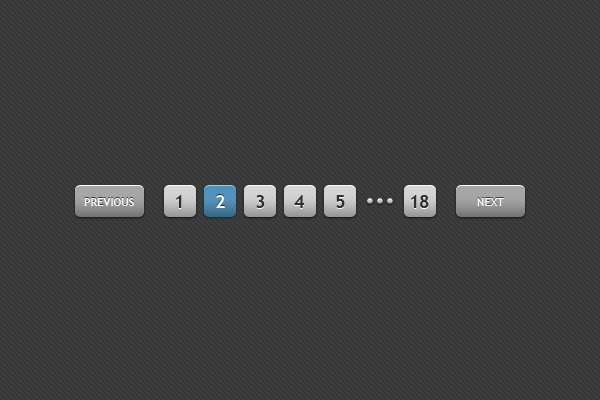
<style>
.page{position:relative;width:600px;height:400px;background:#3d3d3d}
.page>*{position:absolute;margin:0}
.t1{font:11px "TrebuchetMS-Bold";color:#ffffff}
.t2{font:18px "TrebuchetMS-Bold";color:#2f2f2f}
.t3{font:18px "TrebuchetMS-Bold";color:#ffffff}
.t4{font:18px "TrebuchetMS-Bold";letter-spacing:-0.03em;color:#2f2f2f}
</style>
<div class="page">
<p class="t1" style="left:84px;top:198px;width:50px;height:8px">PREVIOUS</p>
<p class="t2" style="left:176px;top:195px;width:6px;height:13px">1</p>
<p class="t3" style="left:216px;top:195px;width:9px;height:13px">2</p>
<p class="t2" style="left:256px;top:195px;width:9px;height:13px">3</p>
<p class="t2" style="left:294px;top:195px;width:10px;height:13px">4</p>
<p class="t2" style="left:336px;top:195px;width:9px;height:13px">5</p>
<p class="t4" style="left:411px;top:195px;width:18px;height:13px">18</p>
<p class="t1" style="left:477px;top:198px;width:27px;height:8px">NEXT</p>
</div>
